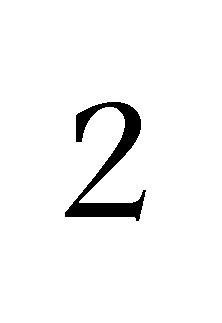
<style>
.page{position:relative;width:222px;height:323px;background:#ffffff}
.page>*{position:absolute;margin:0}
.t1{font:180px "FootlightMTLight";color:#000000}
</style>
<div class="page">
<p class="t1" style="left:65px;top:102px;width:81px;height:119px">2</p>
</div>
